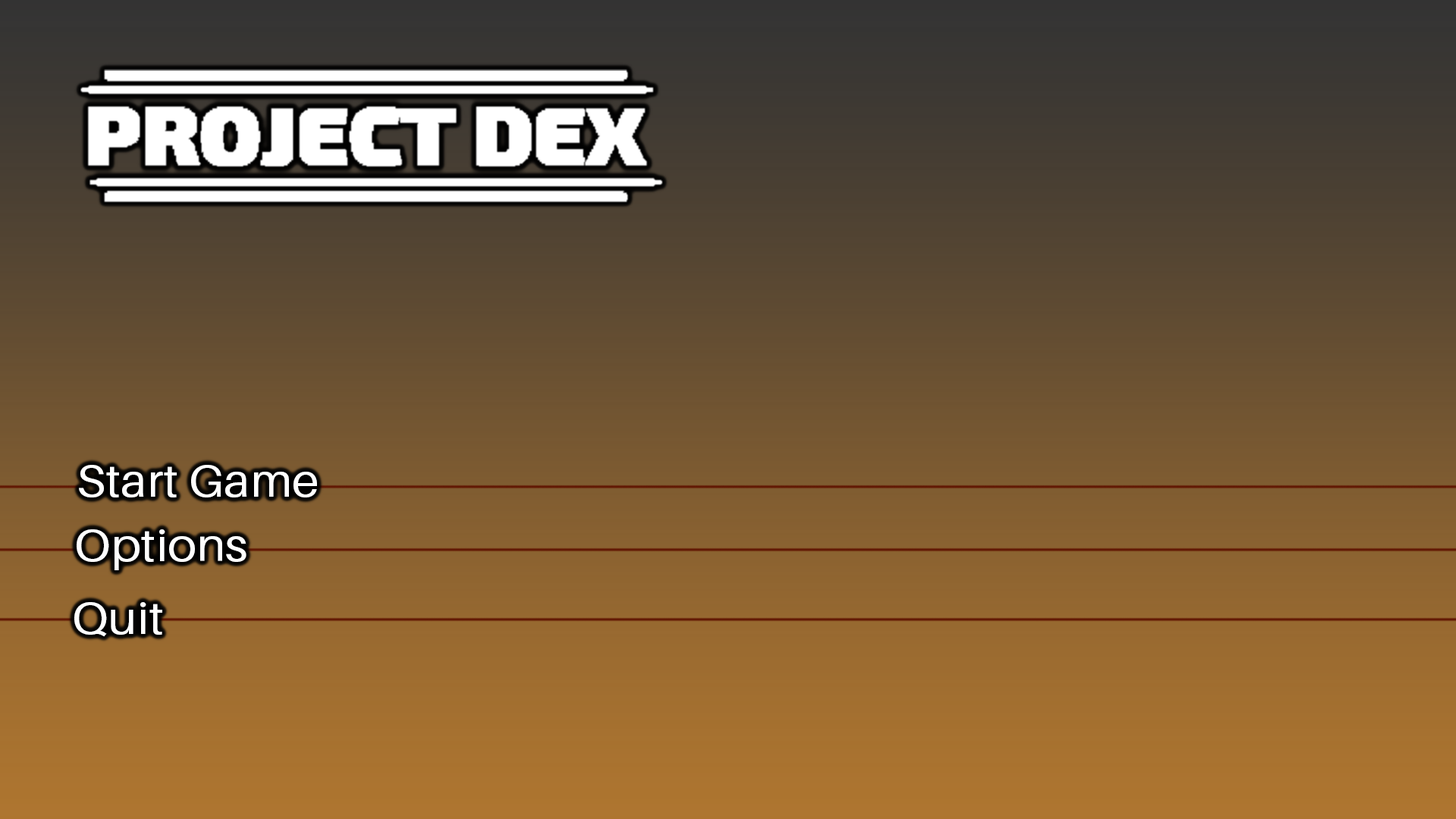
<style>
.page{position:relative;width:1456px;height:819px}
.page>*{position:absolute;margin:0}
.t1{font:45.5px "Aileron-Regular";color:#ffffff;scale:1.08 1}
</style>
<div class="page">
<p class="t1" style="left:79px;top:465px;width:238px;height:32px">Start Game</p>
<p class="t1" style="left:77px;top:529px;width:169px;height:41px">Options</p>
<p class="t1" style="left:74px;top:602px;width:88px;height:35px">Quit</p>
</div>
